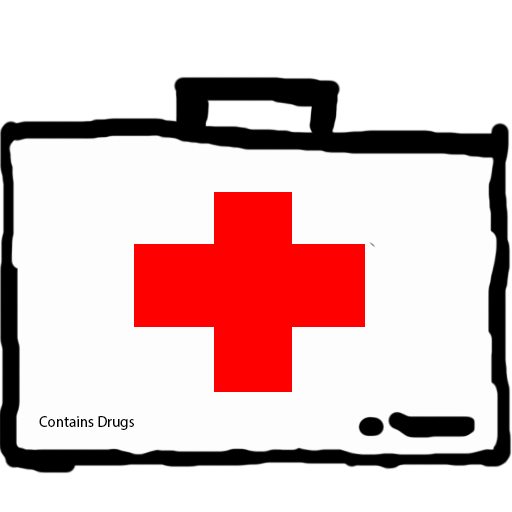
<style>
.page{position:relative;width:512px;height:512px;background:#fdfdfd}
.page>*{position:absolute;margin:0}
.t1{font:12px "MyriadPro-Regular";color:#000000}
</style>
<div class="page">
<p class="t1" style="left:39px;top:416px;width:95px;height:14px">Contains Drugs</p>
</div>
